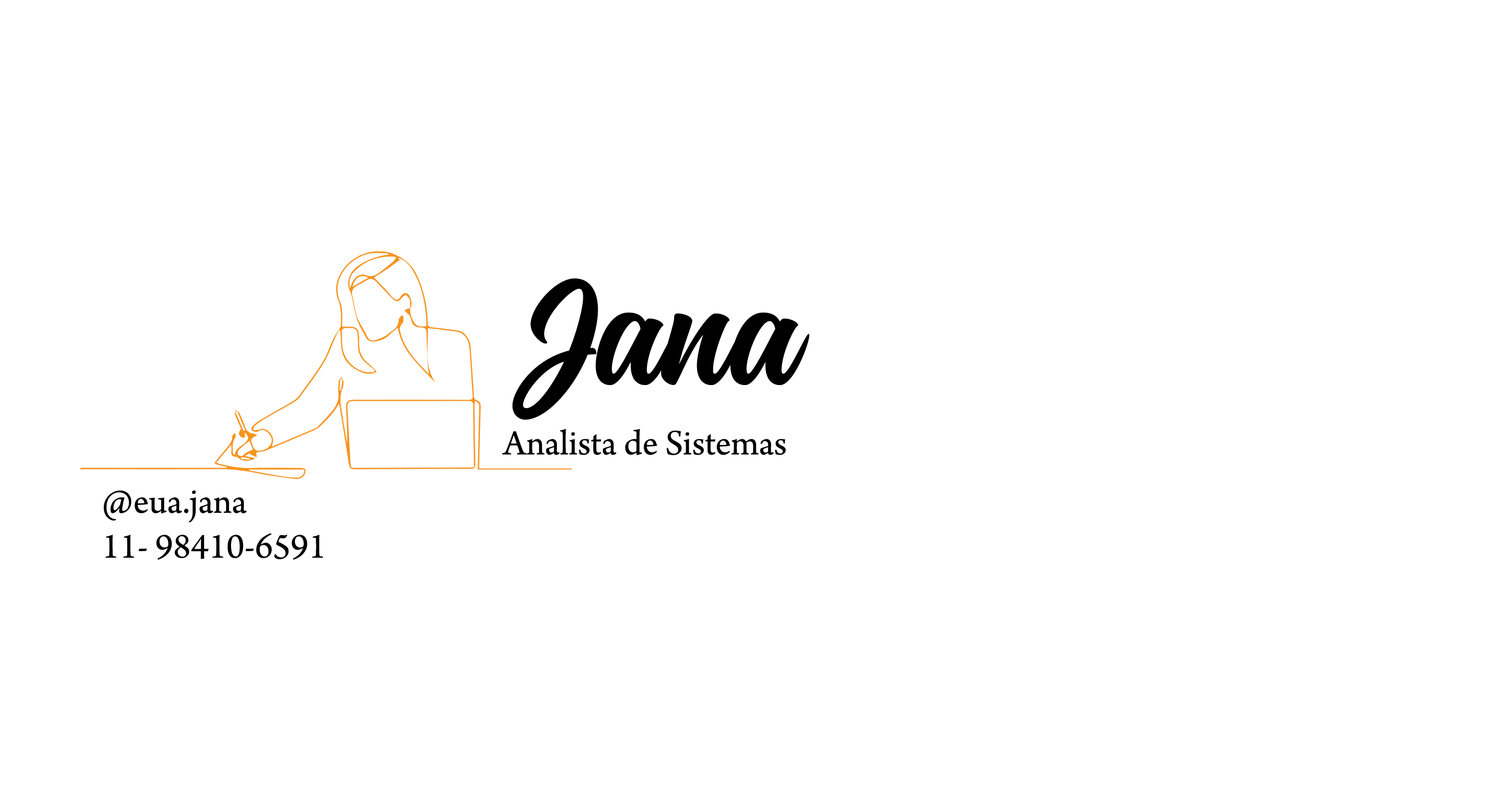
<style>
.page{position:relative;width:1497px;height:796px;background:#ffffff}
.page>*{position:absolute;margin:0}
.t1{font:149.7px "Montana";color:#000000}
.t2{font:37.4px "ArnoPro-Regular";color:#010000}
</style>
<div class="page">
<p class="t1" style="left:513px;top:278px;width:296px;height:142px">Jana</p>
<p class="t2" style="left:502px;top:429px;width:284px;height:27px">Analista de Sistemas</p>
<p class="t2" style="left:104px;top:491px;width:219px;height:69px">@eua.jana<br>11- 98410-6591</p>
</div>
